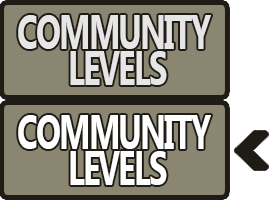
<style>
.page{position:relative;width:274px;height:200px;background:#8a8671}
.page>*{position:absolute;margin:0}
.t1{font:48px/36px "Gadugi-Bold";letter-spacing:-0.05em;color:#e6e6e6;scale:0.68 1}
.t2{font:48px/36px "Gadugi-Bold";letter-spacing:-0.05em;color:#ffffff;scale:0.68 1}
</style>
<div class="page">
<p class="t1" style="left:18px;top:15px;width:193px;height:70px;text-align:center">COMMUNITY <br>LEVELS</p>
<p class="t2" style="left:18px;top:115px;width:193px;height:70px;text-align:center">COMMUNITY <br>LEVELS</p>
</div>
